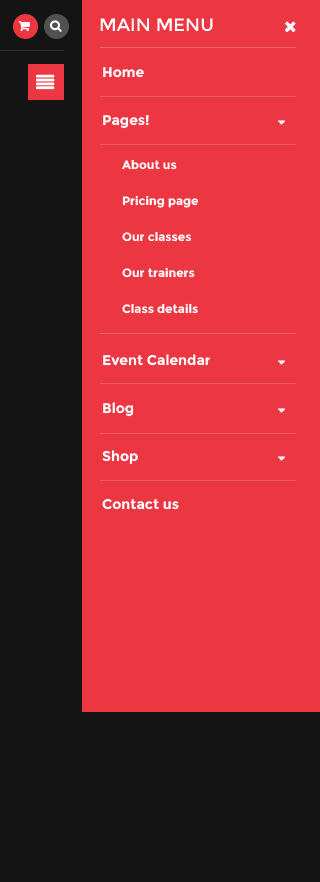
<style>
.page{position:relative;width:320px;height:882px;background:#ec3642}
.page>*{position:absolute;margin:0}
.t1{font:18px "Montserrat-Regular";color:#ffffff;text-transform:uppercase}
.t2{font:14px/48px "Montserrat-Bold";color:#ffffff}
.t3{font:12px/36px "Montserrat-Bold";color:#ffffff}
</style>
<div class="page">
<p class="t1" style="left:100px;top:18px;width:113px;height:14px">Main menu</p>
<p class="t2" style="left:102px;top:67px;width:109px;height:443px">Home<br>Pages!<br><br><br><br><br>Event Calendar<br>Blog<br>Shop<br>Contact us</p>
<p class="t3" style="left:122px;top:159px;width:77px;height:155px">About us<br>Pricing page<br>Our classes<br>Our trainers<br>Class details</p>
</div>
